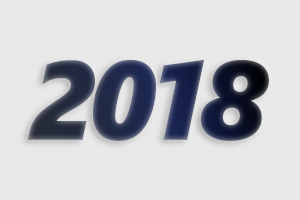
<style>
.page{position:relative;width:300px;height:200px;background:#e8e8e9}
.page>*{position:absolute;margin:0}
.t1{font:111.4px "SegoeUIBlack-Italic";letter-spacing:-0.05em}
</style>
<div class="page">
<p class="t1" style="left:28px;top:60px;width:241px;height:81px">2018</p>
</div>
